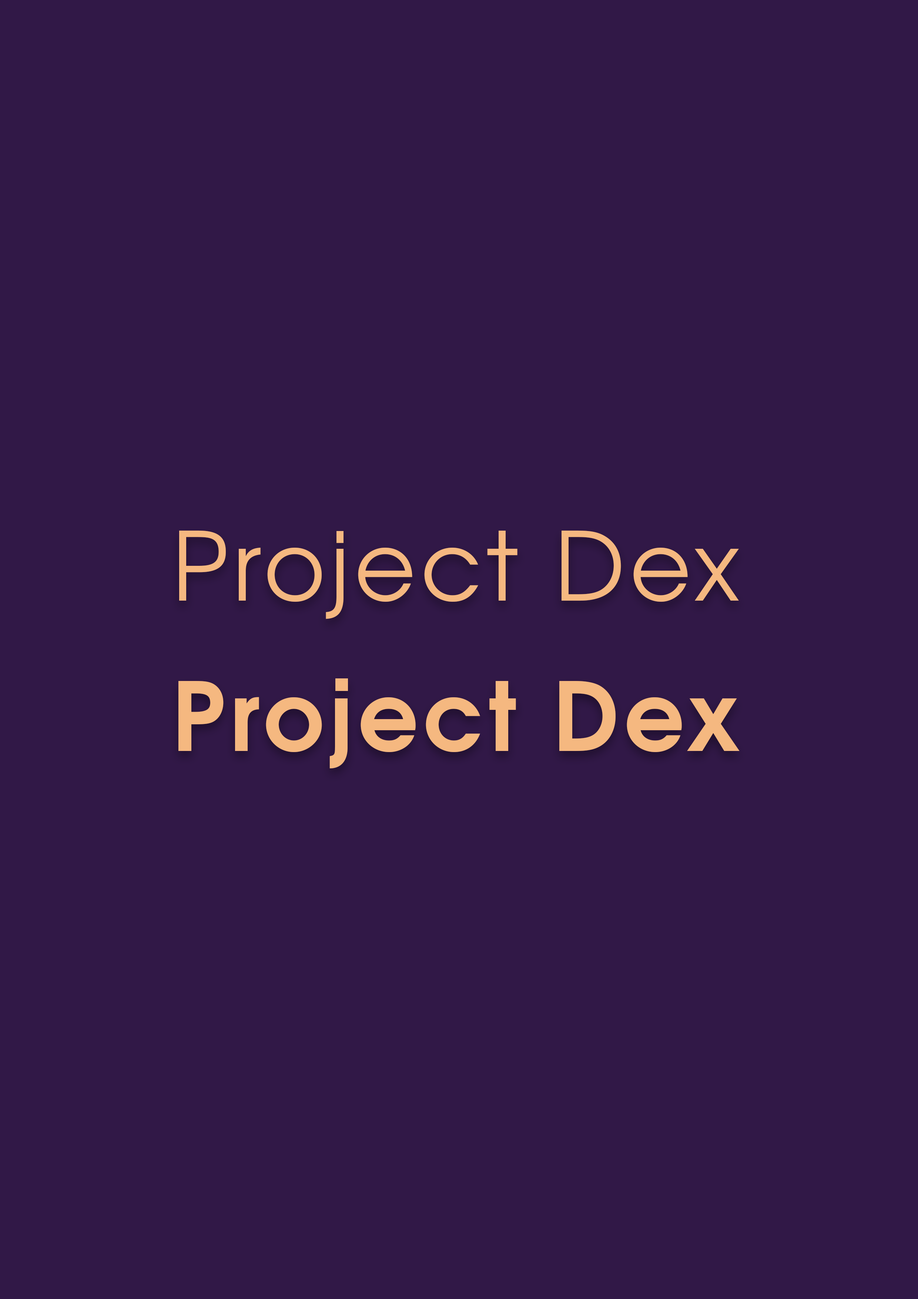
<style>
.page{position:relative;width:918px;height:1299px;background:#311847}
.page>*{position:absolute;margin:0}
.t1{font:94.8px "TeXGyreAdventor-Regular";letter-spacing:0.05em;color:#f5b880}
.t2{font:94.8px "TeXGyreAdventor-Bold";letter-spacing:0.05em;color:#f5b880}
</style>
<div class="page">
<p class="t1" style="left:179px;top:530px;width:560px;height:89px">Project Dex</p>
<p class="t2" style="left:178px;top:678px;width:562px;height:90px">Project Dex</p>
</div>
